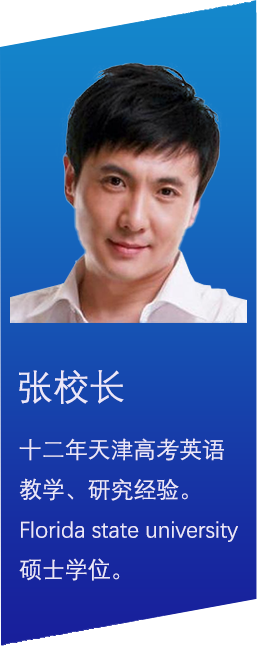
<style>
.page{position:relative;width:257px;height:646px}
.page>*{position:absolute;margin:0}
.t1{font:36px "DengXian";color:#ebe7f8}
.t2{font:22.9px "DengXian";color:#ebe7f8}
</style>
<div class="page">
<p class="t1" style="left:19px;top:370px;width:105px;height:34px">张校长</p>
<p class="t2" style="left:19px;top:438px;width:219px;height:143px">十二年天津高考英语<br>教学、研究经验。<br>Florida state university<br>硕士学位。</p>
</div>
